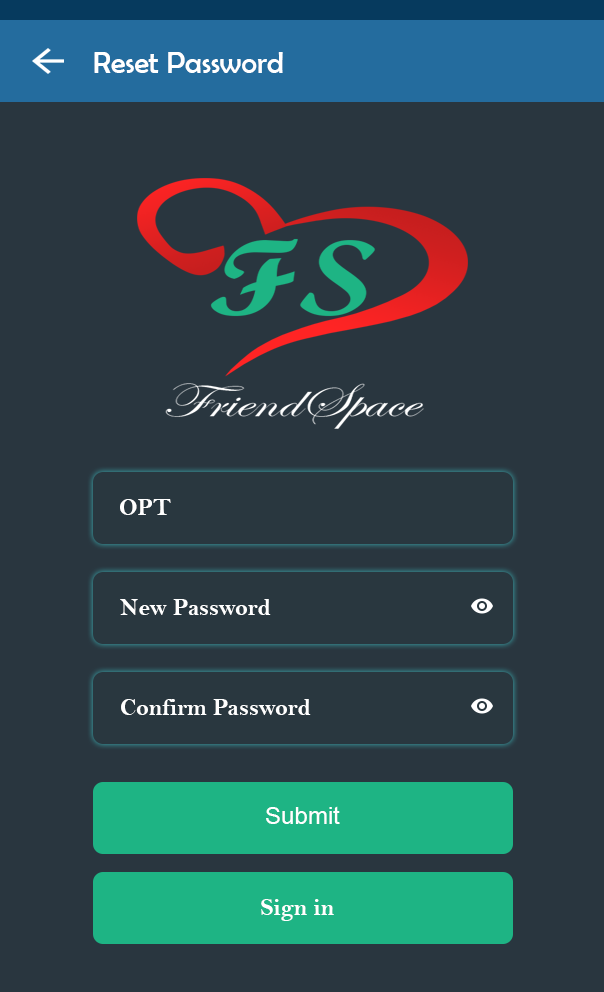
<style>
.page{position:relative;width:604px;height:992px;background:#29363f}
.page>*{position:absolute;margin:0}
.t1{font:30px "BerlinSansFB-Reg";color:#ffffff}
.t2{font:24px "BellMTBold";color:#ffffff}
.t3{font:24px "ArialMT";color:#ffffff}
</style>
<div class="page">
<p class="t1" style="left:94px;top:52px;width:189px;height:21px">Reset Password</p>
<p class="t2" style="left:120px;top:499px;width:51px;height:16px">OPT</p>
<p class="t2" style="left:120px;top:599px;width:151px;height:16px">New Password</p>
<p class="t2" style="left:121px;top:699px;width:190px;height:16px">Confirm Password</p>
<p class="t3" style="left:266px;top:806px;width:74px;height:18px">Submit</p>
<p class="t2" style="left:261px;top:899px;width:73px;height:22px">Sign in</p>
</div>
